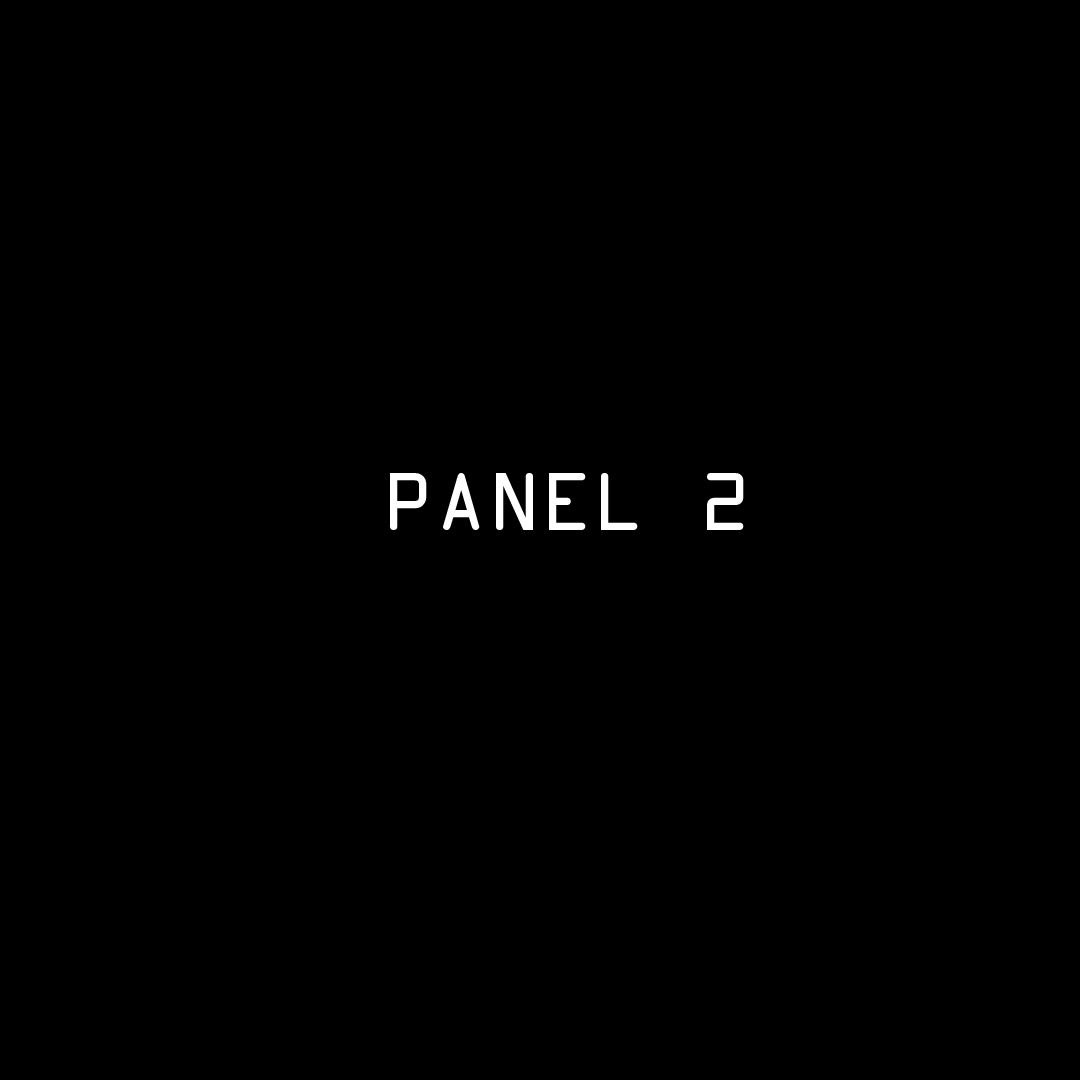
<style>
.page{position:relative;width:1080px;height:1080px;background:#000000}
.page>*{position:absolute;margin:0}
.t1{font:73.6px "OCRAStd";color:#ffffff}
</style>
<div class="page">
<p class="t1" style="left:390px;top:473px;width:354px;height:57px">PANEL 2</p>
</div>
